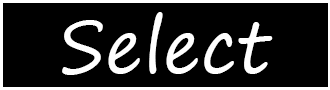
<style>
.page{position:relative;width:330px;height:90px;background:#000000}
.page>*{position:absolute;margin:0}
.t1{font:72px "SegoePrint";color:#ffffff}
</style>
<div class="page">
<p class="t1" style="left:62px;top:12px;width:211px;height:63px">Select</p>
</div>
